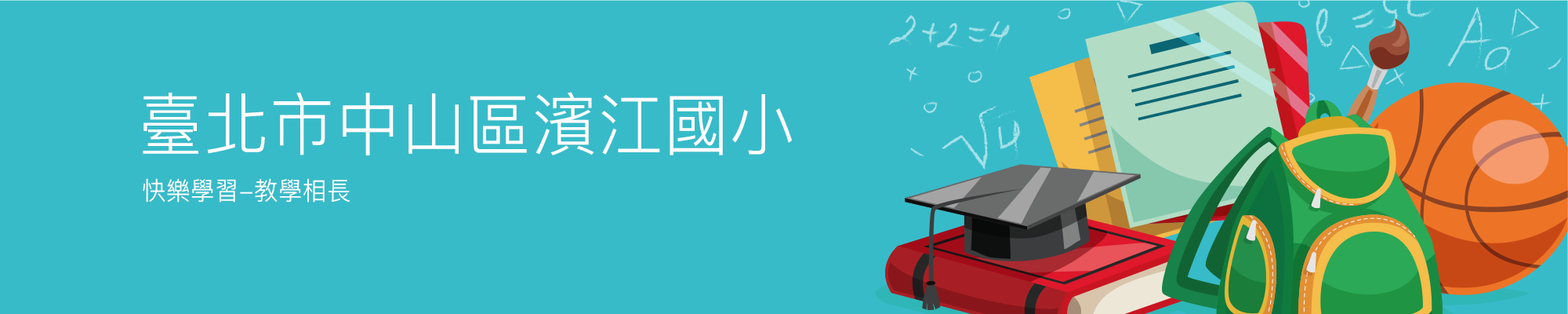
<style>
.page{position:relative;width:1568px;height:314px;background:#37bbc9}
.page>*{position:absolute;margin:0}
.t1{font:67.7px "PingFangTC-Light";letter-spacing:0.02em;color:#ffffff;scale:0.95 1}
.t2{font:25.1px "PingFangTC-Light";letter-spacing:0.02em;color:#ffffff;scale:0.95 1}
</style>
<div class="page">
<p class="t1" style="left:143px;top:92px;width:649px;height:63px">臺北市中山區濱江國小</p>
<p class="t2" style="left:143px;top:178px;width:207px;height:24px">快樂學習-教學相長</p>
</div>
